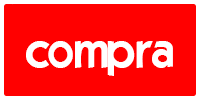
<style>
.page{position:relative;width:200px;height:100px;background:#ff0000}
.page>*{position:absolute;margin:0}
.t1{font:48px "ELEGANCE";color:#ffffff}
</style>
<div class="page">
<p class="t1" style="left:26px;top:41px;width:147px;height:35px">compra</p>
</div>
